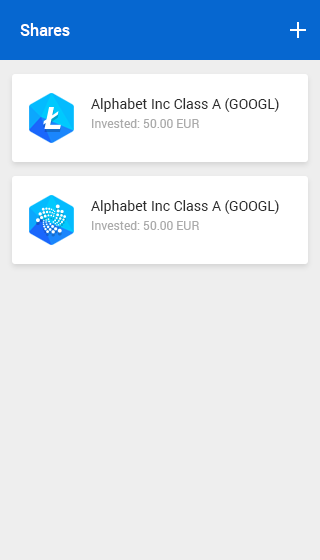
<style>
.page{position:relative;width:320px;height:560px;background:#eeeeee}
.page>*{position:absolute;margin:0}
.t1{font:16px "Roboto-Medium";color:#ffffff}
.t2{font:14px "Roboto-Regular";color:#2d2d2d}
.t3{font:12px "Roboto-Regular";color:#ababab}
</style>
<div class="page">
<p class="t1" style="left:20px;top:23px;width:50px;height:13px">Shares</p>
<p class="t2" style="left:91px;top:98px;width:188px;height:14px">Alphabet Inc Class A (GOOGL)</p>
<p class="t3" style="left:92px;top:119px;width:107px;height:9px">Invested: 50.00 EUR</p>
<p class="t2" style="left:91px;top:200px;width:188px;height:14px">Alphabet Inc Class A (GOOGL)</p>
<p class="t3" style="left:92px;top:221px;width:107px;height:9px">Invested: 50.00 EUR</p>
</div>
